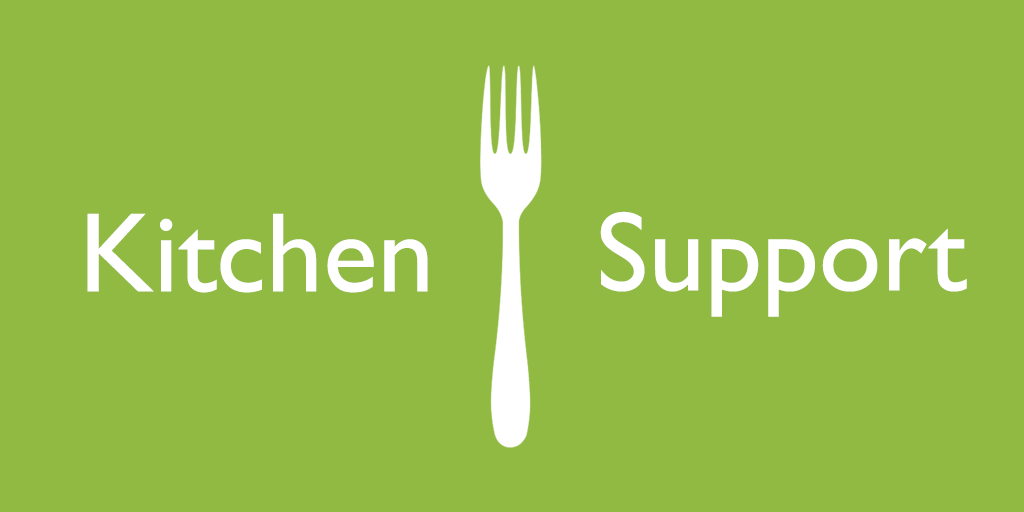
<style>
.page{position:relative;width:1024px;height:512px;background:#91ba43}
.page>*{position:absolute;margin:0}
.t1{font:113.7px "GillSans";color:#ffffff}
</style>
<div class="page">
<p class="t1" style="left:87px;top:213px;width:341px;height:80px">Kitchen</p>
<p class="t1" style="left:600px;top:211px;width:367px;height:106px">Support</p>
</div>
